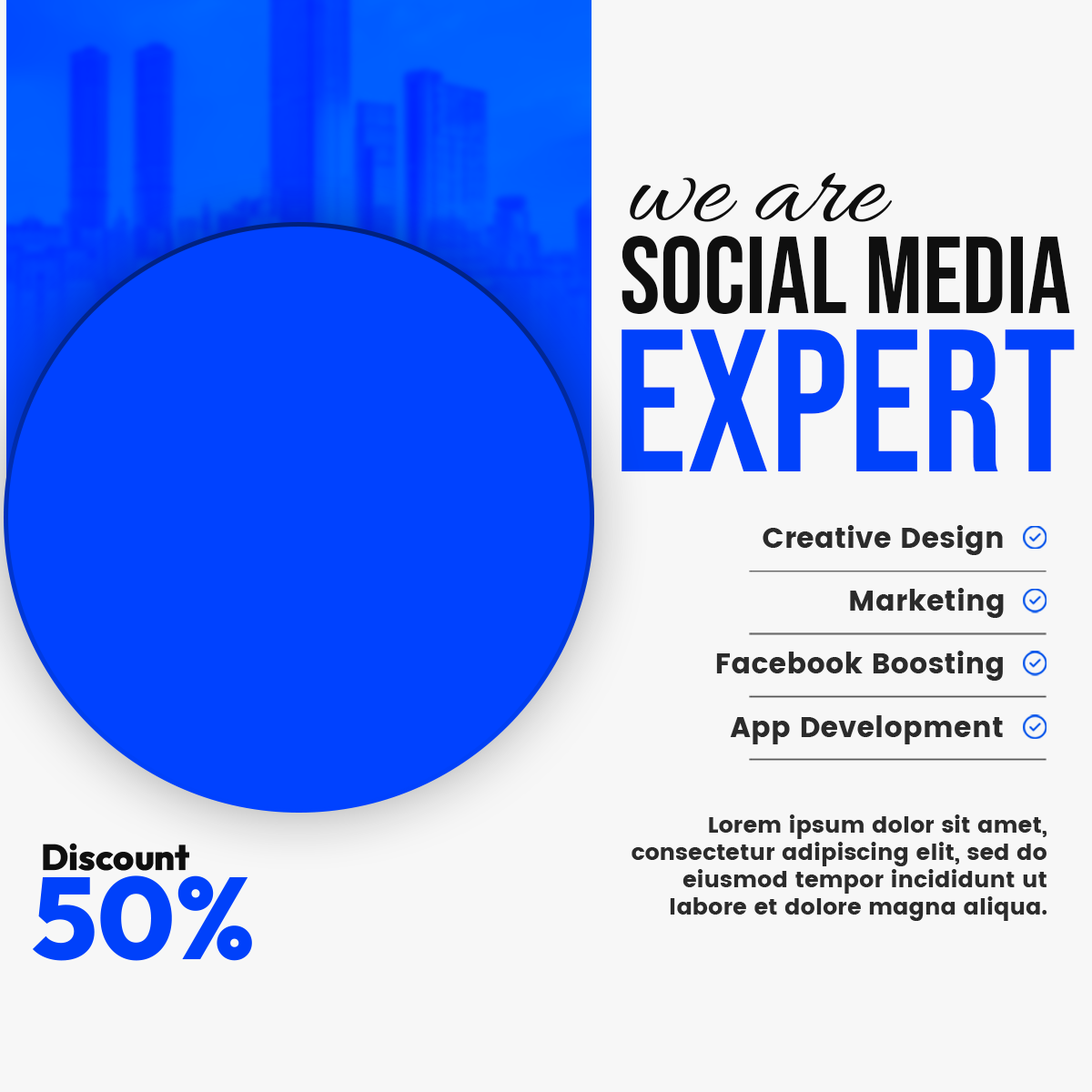
<style>
.page{position:relative;width:1092px;height:1092px;background:#f7f7f7}
.page>*{position:absolute;margin:0}
.t1{font:118.1px "Allura-Regular";color:#0f0f0f}
.t2{font:108.6px "BebasNeue-Regular";color:#0f0f0f}
.t3{font:202.6px "BebasNeue-Regular";color:#0041fa}
.t4{font:28.7px "Poppins-Bold";color:#2b2b2b}
.t5{font:22.7px "Poppins-Bold";color:#2b2b2b}
.t6{font:36.2px "Outfit-ExtraBold";color:#0f0f0f}
.t7{font:115.5px "Outfit-ExtraBold";color:#0041fa}
</style>
<div class="page">
<p class="t1" style="left:630px;top:172px;width:263px;height:50px">we are</p>
<p class="t2" style="left:622px;top:236px;width:448px;height:78px">Social Media</p>
<p class="t3" style="left:622px;top:329px;width:453px;height:142px">Expert</p>
<p class="t4" style="left:763px;top:525px;width:240px;height:30px">Creative Design</p>
<p class="t4" style="left:850px;top:588px;width:154px;height:30px">Marketing</p>
<p class="t4" style="left:716px;top:651px;width:287px;height:30px">Facebook Boosting</p>
<p class="t4" style="left:730px;top:715px;width:273px;height:29px">App Development</p>
<p class="t5" style="left:632px;top:814px;width:414px;height:107px;text-align:right">Lorem ipsum dolor sit amet, <br>consectetur adipiscing elit, sed do <br>eiusmod tempor incididunt ut labore et dolore magna aliqua.</p>
<p class="t6" style="left:43px;top:843px;width:146px;height:28px">Discount</p>
<p class="t7" style="left:33px;top:875px;width:219px;height:86px">50%</p>
</div>
